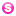
<style>
.page{position:relative;width:16px;height:16px;background:#ffffff}
.page>*{position:absolute;margin:0}
.t1{font:10.6px "HelveticaNeueLTStd-Hv";letter-spacing:0.01em;color:#ffffff}
</style>
<div class="page">
<p class="t1" style="left:4px;top:4px;width:8px;height:8px">S</p>
</div>
